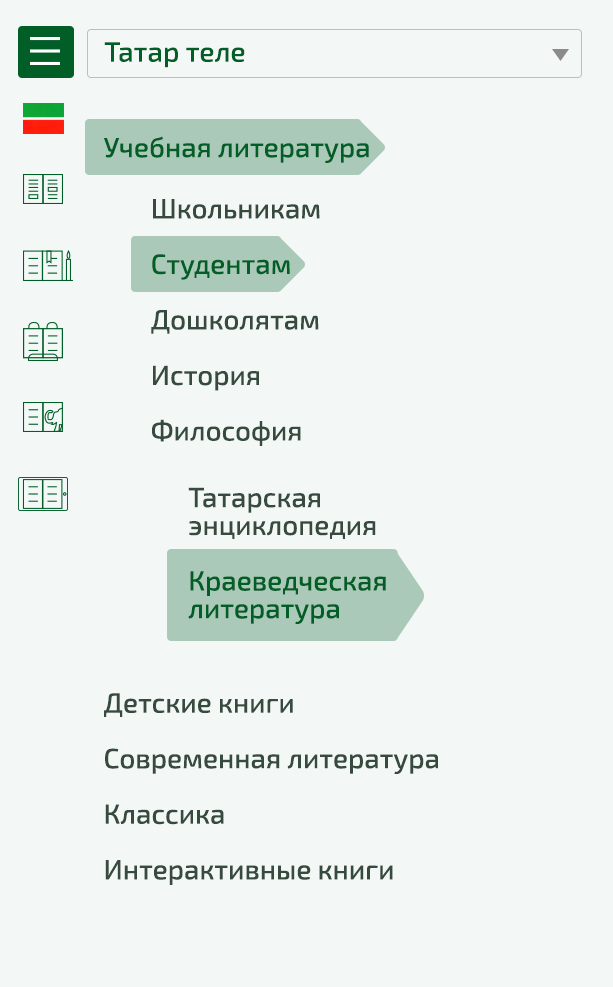
<style>
.page{position:relative;width:613px;height:987px;background:#f3f8f7}
.page>*{position:absolute;margin:0}
.t1{font:28px "Exo2-Medium";color:#015e27}
.t2{font:27.8px/27.8px "Exo2-Medium";color:#364b3e}
.t3{font:27.8px/27.8px "Exo2-Medium";color:#015e27}
</style>
<div class="page">
<p class="t1" style="left:104px;top:42px;width:141px;height:26px">Татар теле</p>
<p class="t2" style="left:104px;top:136px;width:334px;height:749px"><span class="t3">Учебная литература<br></span><br><br><br><br><br><br><br><br><br><br><br><br><br><br><br><br><br><br><br>Детские книги<br><br>Современная литература<br><br>Классика<br><br>Интерактивные книги</p>
<p class="t2" style="left:151px;top:199px;width:169px;height:247px">Школьникам<br><br><span class="t3">Студентам<br></span><br>Дошколятам<br><br>История<br><br>Философия</p>
<p class="t3" style="left:188px;top:487px;width:198px;height:137px"><span class="t2">Татарская<br>энциклопедия<br><br></span>Краеведческая<br>литература</p>
</div>
